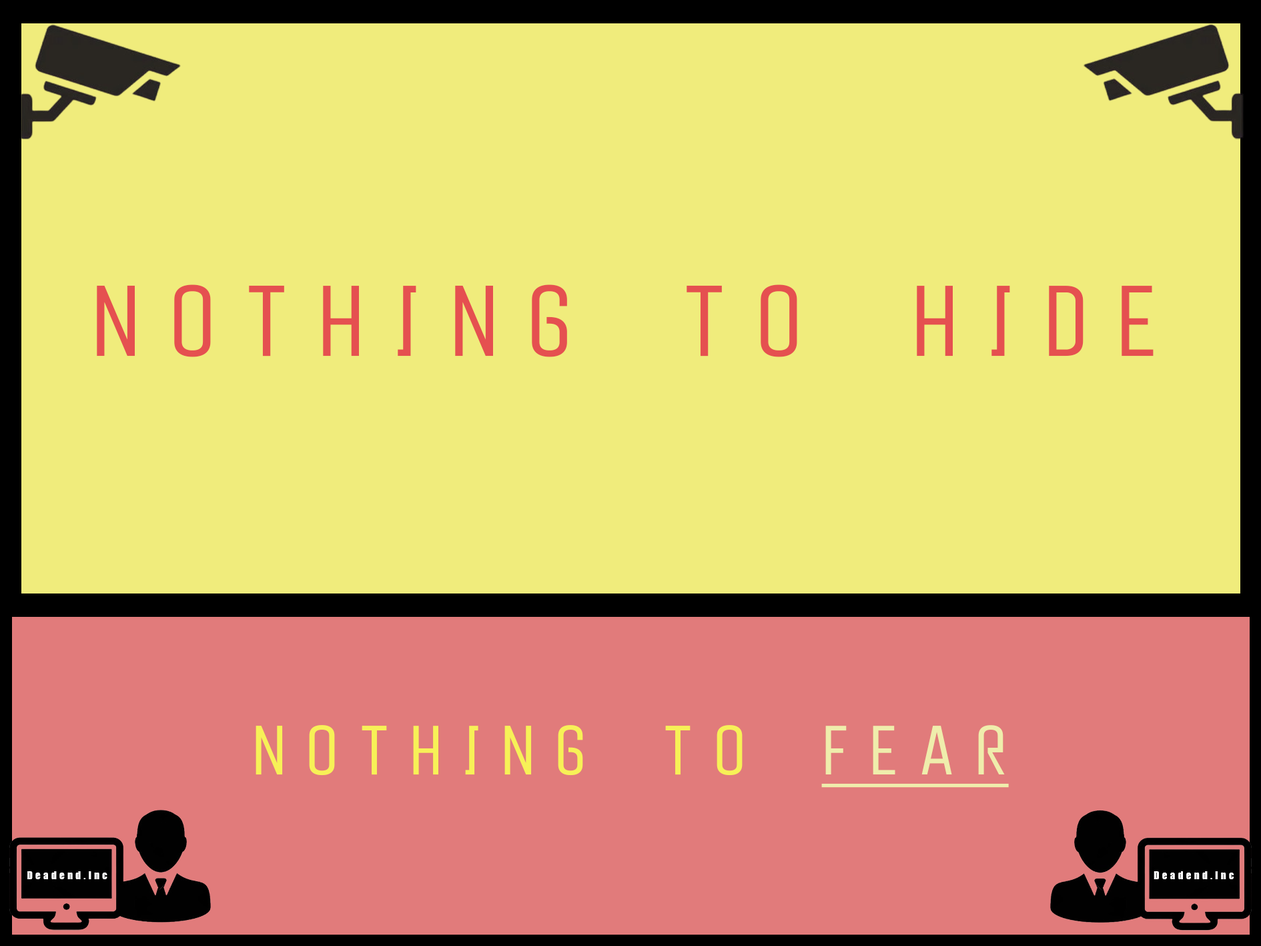
<style>
.page{position:relative;width:1261px;height:946px;background:#f0ec7c}
.page>*{position:absolute;margin:0}
.t1{font:100.1px "PeytonDisplay-ExtraLight";letter-spacing:0.28em;color:#e55050}
.t2{font:69.5px "PeytonDisplay-ExtraLight";letter-spacing:0.28em;color:#f7f157}
.t3{font:69.5px "PeytonDisplay-ExtraLight";letter-spacing:0.28em;color:#efedac;text-decoration:underline}
.t4{font:10.1px "Impact";letter-spacing:0.28em;color:#ffffff}
</style>
<div class="page">
<p class="t1" style="left:97px;top:284px;width:1057px;height:73px">NOTHING TO HIDE</p>
<p class="t2" style="left:256px;top:725px;width:753px;height:62px">NOTHING TO <span class="t3">FEAR</span></p>
<p class="t4" style="left:27px;top:871px;width:80px;height:8px">Deadend.Inc</p>
<p class="t4" style="left:1154px;top:871px;width:80px;height:8px">Deadend.Inc</p>
</div>
